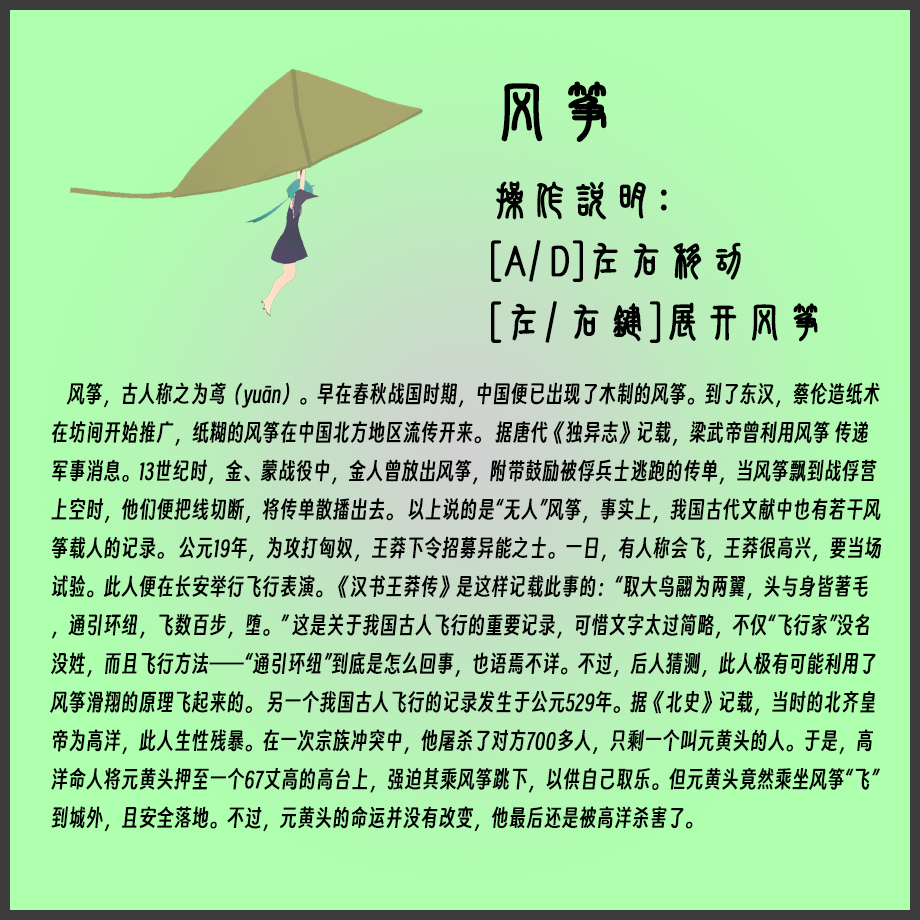
<style>
.page{position:relative;width:920px;height:920px;background:#aeffae}
.page>*{position:absolute;margin:0}
.t1{font:64px "SJxiaozhuanjian-Regular";color:#000000;font-weight:bold}
.t2{font:40px/61px "SJxiaozhuanjian-Regular";color:#000000;font-weight:bold}
.t3{font:22px "SmileySans-Oblique";color:#000000}
</style>
<div class="page">
<p class="t1" style="left:501px;top:81px;width:106px;height:61px">风筝</p>
<p class="t2" style="left:491px;top:181px;width:327px;height:162px">操作说明：<br>[A/D]左右移动<br>[左/右键]展开风筝</p>
<p class="t3" style="left:50px;top:382px;width:832px;height:450px">风筝，古人称之为鸢（yuān）。早在春秋战国时期，中国便已出现了木制的风筝。到了东汉，蔡伦造纸术在坊间开始推广，纸糊的风筝在中国北方地区流传开来。 据唐代《独异志》记载，梁武帝曾利用风筝 传递军事消息。13世纪时，金、蒙战役中，金人曾放出风筝，附带鼓励被俘兵士逃跑的传单，当风筝飘到战俘营上空时，他们便把线切断，将传单散播出去。 以上说的是“无人”风筝，事实上，我国古代文献中也有若干风筝载人的记录。 公元19年，为攻打匈奴，王莽下令招募异能之士。一日，有人称会飞，王莽很高兴，要当场试验。此人便在长安举行飞行表演。《汉书王莽传》是这样记载此事的：“取大鸟翮为两翼，头与身皆著毛，通引环纽，飞数百步，堕。” 这是关于我国古人飞行的重要记录，可惜文字太过简略，不仅“飞行家”没名没姓，而且飞行方法——“通引环纽”到底是怎么回事，也语焉不详。不过，后人猜测，此人极有可能利用了风筝滑翔的原理飞起来的。 另一个我国古人飞行的记录发生于公元529年。据《北史》记载，当时的北齐皇帝为高洋，此人生性残暴。在一次宗族冲突中，他屠杀了对方700多人，只剩一个叫元黄头的人。于是，高洋命人将元黄头押至一个67丈高的高台上，强迫其乘风筝跳下，以供自己取乐。但元黄头竟然乘坐风筝“飞”到城外，且安全落地。不过，元黄头的命运并没有改变，他最后还是被高洋杀害了。</p>
</div>
